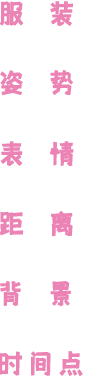
<style>
.page{position:relative;width:86px;height:376px;background:#ffffff}
.page>*{position:absolute;margin:0}
.t1{font:16.3px "shetumodengxiaofangti";letter-spacing:0.94em;color:#eb84b4;font-weight:bold;scale:0.94 1}
.t2{font:16.3px "shetumodengxiaofangti";letter-spacing:0.16em;color:#eb84b4;font-weight:bold;scale:0.94 1}
</style>
<div class="page">
<p class="t1" style="left:0px;top:1px;width:73px;height:25px">服装</p>
<p class="t1" style="left:0px;top:70px;width:74px;height:26px">姿势</p>
<p class="t1" style="left:0px;top:141px;width:74px;height:25px">表情</p>
<p class="t1" style="left:0px;top:211px;width:73px;height:26px">距离</p>
<p class="t1" style="left:0px;top:281px;width:71px;height:26px">背景</p>
<p class="t2" style="left:0px;top:351px;width:83px;height:25px">时间点</p>
</div>
